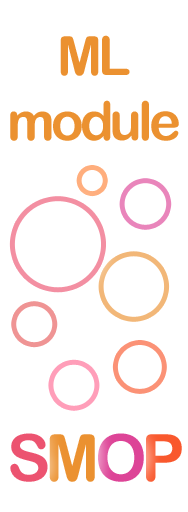
<style>
.page{position:relative;width:188px;height:512px;background:#ffffff}
.page>*{position:absolute;margin:0}
.t1{font:54px "ArialRoundedMTBold";letter-spacing:-0.075em;color:#eb9130}
.t2{font:65.1px "ArialRoundedMTBold";letter-spacing:-0.075em;color:#ec5370}
.t3{font:65.1px "ArialRoundedMTBold";letter-spacing:-0.075em;color:#eb9130}
.t4{font:65.1px "ArialRoundedMTBold";letter-spacing:-0.075em;color:#dd4497}
.t5{font:65.1px "ArialRoundedMTBold";letter-spacing:-0.075em;color:#f96138}
</style>
<div class="page">
<p class="t1" style="left:10px;top:35px;width:169px;height:106px;text-align:center">ML<br>module</p>
<p class="t2" style="left:10px;top:433px;width:38px;height:49px">S</p>
<p class="t3" style="left:49px;top:434px;width:46px;height:48px">M</p>
<p class="t4" style="left:98px;top:433px;width:46px;height:49px">O</p>
<p class="t5" style="left:146px;top:434px;width:36px;height:48px">P</p>
</div>
